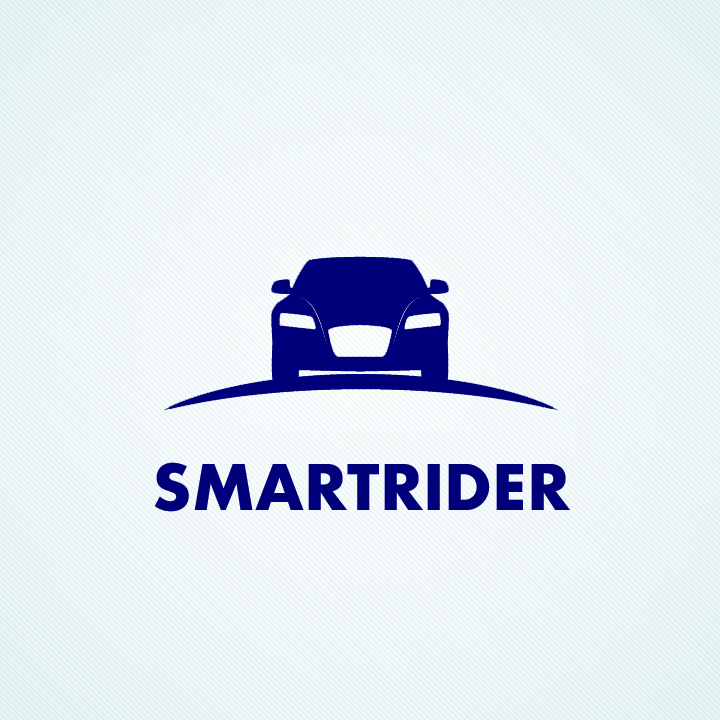
<style>
.page{position:relative;width:720px;height:720px}
.page>*{position:absolute;margin:0}
.t1{font:61px "Futura-Bold";color:#00007a}
</style>
<div class="page">
<p class="t1" style="left:154px;top:462px;width:416px;height:50px">SMARTRIDER</p>
</div>
